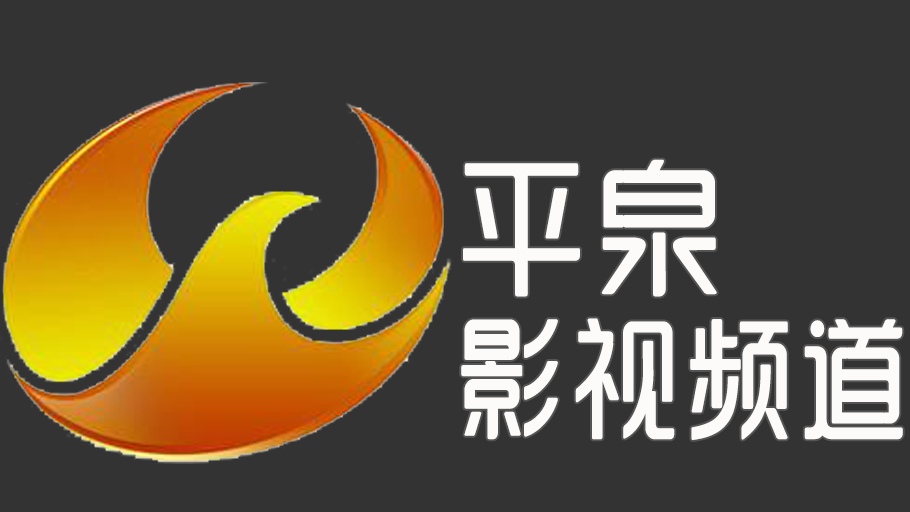
<style>
.page{position:relative;width:910px;height:512px;background:#333333}
.page>*{position:absolute;margin:0}
.t1{font:132px/160px "SJyunlvyuan";letter-spacing:0.02em;color:#fcfbf9;scale:0.85 1}
.t2{font:150px/160px "SJyunlvyuan";letter-spacing:0.02em;color:#fcfbf9;scale:0.9 1}
</style>
<div class="page">
<p class="t1" style="left:461px;top:159px;width:442px;height:281px"><span class="t2">平泉<br></span>影视频道</p>
</div>
